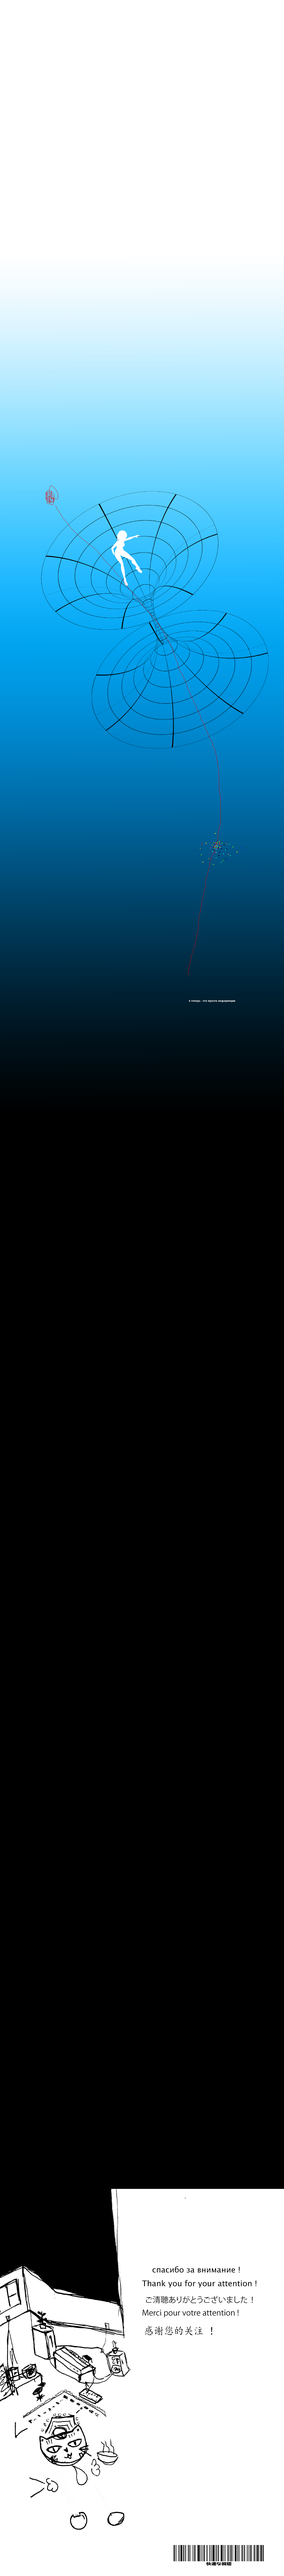
<style>
.page{position:relative;width:284px;height:2576px;background:#000000}
.page>*{position:absolute;margin:0}
.t1{font:7.9px "LucidaSansUnicode";color:#000000}
.t2{font:7.9px "KozGoPr6N-Regular";color:#000000}
.t3{font:10.5px "KaiTi";color:#000000;scale:0.95 1}
</style>
<div class="page">
<p class="t1" style="left:152px;top:2266px;width:88px;height:7px">спасибо за внимание !</p>
<p class="t1" style="left:142px;top:2280px;width:114px;height:8px">Thank you for your attention !</p>
<p class="t2" style="left:146px;top:2296px;width:106px;height:7px">ご清聴ありがとうございました ！</p>
<p class="t2" style="left:142px;top:2309px;width:96px;height:9px">Merci pour votre attention !</p>
<p class="t3" style="left:144px;top:2326px;width:68px;height:9px">感谢您的关注 ！</p>
</div>
